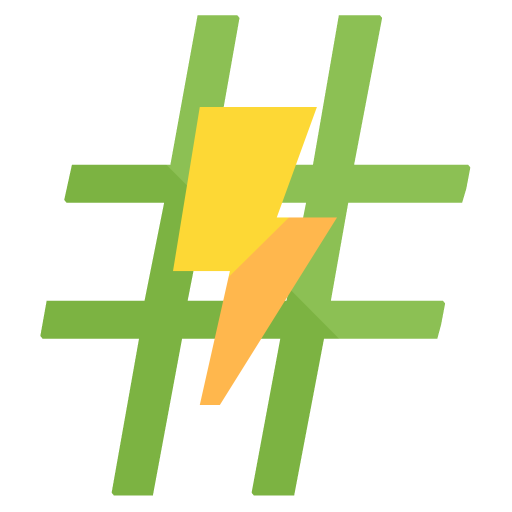
<style>
.page{position:relative;width:512px;height:512px;background:#ffffff}
.page>*{position:absolute;margin:0}
.t1{font:679.2px "GujaratiSangamMN";letter-spacing:-0.04em;color:#7cb342;font-weight:bold}
</style>
<div class="page">
<p class="t1" style="left:40px;top:15px;width:431px;height:481px">#</p>
</div>
